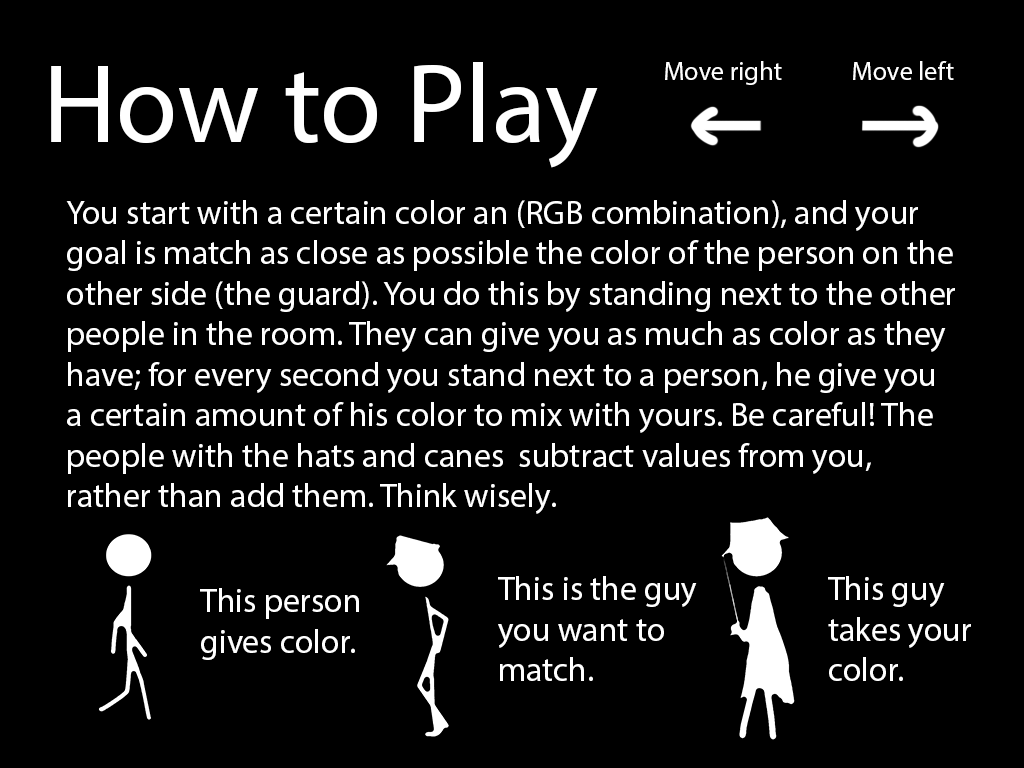
<style>
.page{position:relative;width:1024px;height:768px;background:#000000}
.page>*{position:absolute;margin:0}
.t1{font:112.5px "MyriadPro-Regular";color:#ffffff}
.t2{font:26.2px "MyriadPro-Regular";color:#ffffff}
.t3{font:33.8px "MyriadPro-Regular";color:#ffffff}
</style>
<div class="page">
<p class="t1" style="left:51px;top:62px;width:547px;height:106px">How to Play</p>
<p class="t2" style="left:665px;top:61px;width:117px;height:24px">Move right</p>
<p class="t2" style="left:853px;top:61px;width:101px;height:19px">Move left</p>
<p class="t3" style="left:66px;top:200px;width:889px;height:314px">You start with a certain color an (RGB combination), and your goal is match as close as possible the color of the person on the other side (the guard). You do this by standing next to the other people in the room. They can give you as much as color as they have; for every second you stand next to a person, he give you a certain amount of his color to mix with yours. Be careful! The people with the hats and canes  subtract values from you, rather than add them. Think wisely.</p>
<p class="t3" style="left:498px;top:576px;width:199px;height:105px">This is the guy you want to match.</p>
<p class="t3" style="left:828px;top:576px;width:143px;height:105px">This guy takes your color.</p>
<p class="t3" style="left:200px;top:588px;width:159px;height:72px">This person gives color.</p>
</div>
